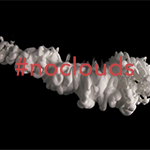
<style>
.page{position:relative;width:150px;height:150px;background:#000000}
.page>*{position:absolute;margin:0}
.t1{font:25px "Avenir-Roman";letter-spacing:0.025em;color:#ca4646}
</style>
<div class="page">
<p class="t1" style="left:15px;top:56px;width:119px;height:20px">#noclouds</p>
</div>
